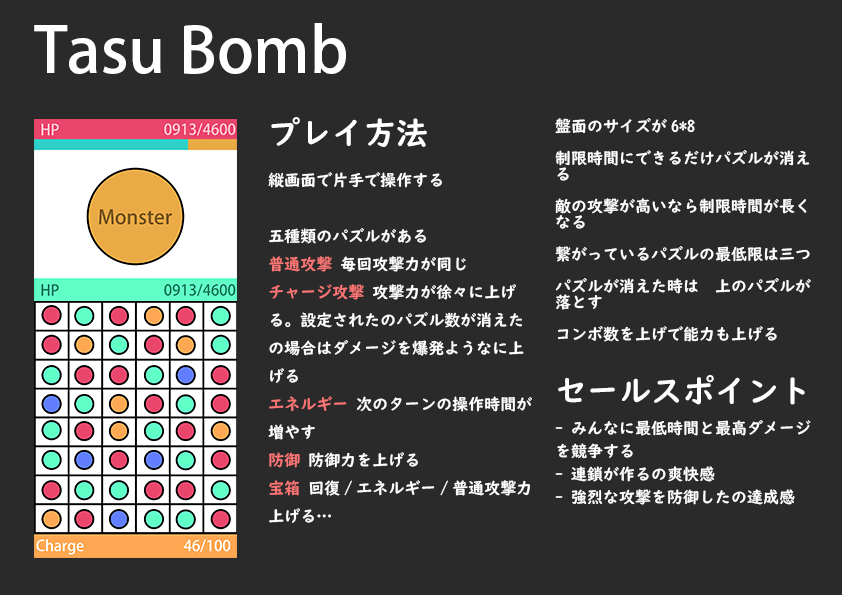
<style>
.page{position:relative;width:842px;height:595px;background:#2a2a2a}
.page>*{position:absolute;margin:0}
.t1{font:62.4px "AdobeFanHeitiStd-Bold";color:#ffffff}
.t2{font:16px "UDDigiKyokashoN-B";color:#ffffff}
.t3{font:32px "UDDigiKyokashoN-B";color:#ffffff}
.t4{font:16px "UDDigiKyokashoN-B";color:#fc7676}
.t5{font:16px/16px "UDDigiKyokashoN-B";color:#ffffff}
.t6{font:32px/23px "UDDigiKyokashoN-B";color:#ffffff}
.t7{font:16px/23px "UDDigiKyokashoN-B";color:#ffffff}
</style>
<div class="page">
<p class="t1" style="left:34px;top:23px;width:312px;height:51px">Tasu Bomb</p>
<p class="t2" style="left:268px;top:117px;width:264px;height:406px"><span class="t3">プレイ方法<br></span>縦画面で片手で操作する<br><br>五種類のパズルがある<br><span class="t4">普通攻撃</span> 毎回攻撃力が同じ<br><span class="t4">チャージ攻撃</span> 攻撃力が徐々に上げる。設定されたのパズル数が消えたの場合はダメージを爆発ようなに上げる<br><span class="t4">エネルギー</span> 次のターンの操作時間が増やす<br><span class="t4">防御</span> 防御力を上げる<br><span class="t4">宝箱</span> 回復/エネルギー/普通攻撃力上げる…</p>
<p class="t5" style="left:555px;top:118px;width:256px;height:387px">盤面のサイズが6*8<br><br>制限時間にできるだけパズルが消える<br><br>敵の攻撃が高いなら制限時間が長くなる<br><br>繋がっているパズルの最低限は三つ<br><br>パズルが消えた時は　上のパズルが落とす  <br><br>コンボ数を上げで能力も上げる <br><br> <br><span class="t6">セールスポイント<br></span><span class="t7"><br>- みんなに最低時間と最高ダメージを競争する<br>- 連鎖が作るの爽快感<br>- 強烈な攻撃を防御したの達成感</span></p>
</div>
